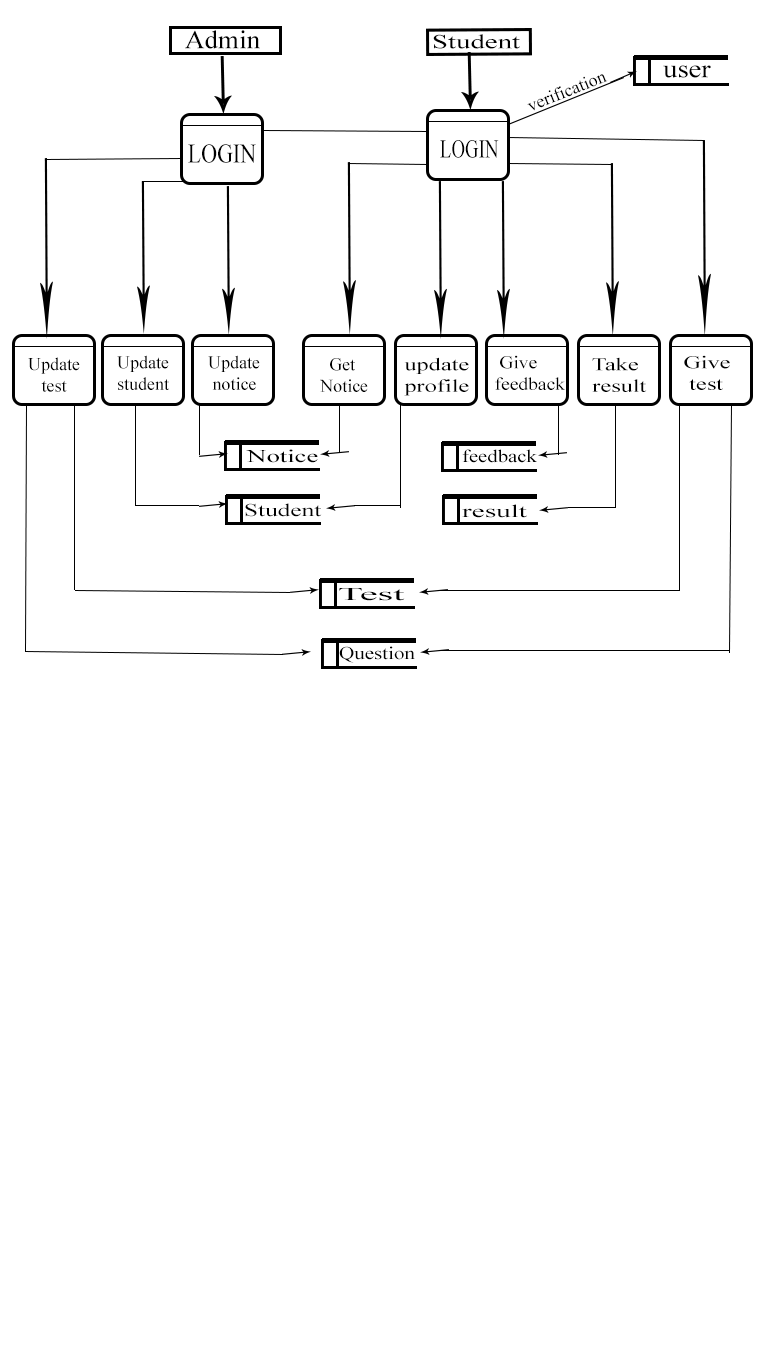
<style>
.page{position:relative;width:768px;height:1366px;background:#ffffff}
.page>*{position:absolute;margin:0}
.t1{font:26px "TimesNewRomanPSMT";color:#000000;scale:1.04 1}
.t2{font:20px "TimesNewRomanPSMT";color:#000000;scale:1.44 1}
.t3{font:25.5px "TimesNewRomanPSMT";color:#000000;scale:1.13 1}
.t4{font:18px "TimesNewRomanPSMT";color:#000000}
.t5{font:26.8px "TimesNewRomanPSMT";color:#000000;scale:0.82 1}
.t6{font:25.9px "TimesNewRomanPSMT";color:#000000;scale:0.73 1}
.t7{font:18px "TimesNewRomanPSMT";color:#000000;scale:1.35 1}
.t8{font:18px "TimesNewRomanPSMT";color:#000000;scale:1.08 1}
.t9{font:18px "TimesNewRomanPSMT";color:#000000;scale:1.48 1}
.t10{font:18px "TimesNewRomanPSMT";color:#000000;scale:1.15 1}
.t11{font:18px "TimesNewRomanPSMT";color:#000000;scale:1.41 1}
.t12{font:18px "TimesNewRomanPSMT";color:#000000;scale:1.62 1}
.t13{font:18px "TimesNewRomanPSMT";color:#000000;scale:2.23 1}
.t14{font:18px "TimesNewRomanPSMT";color:#000000;scale:1.17 1}
</style>
<div class="page">
<p class="t1" style="left:185px;top:30px;width:75px;height:19px">Admin</p>
<p class="t2" style="left:433px;top:34px;width:87px;height:15px">Student</p>
<p class="t3" style="left:663px;top:65px;width:48px;height:13px">user</p>
<p class="t4" style="left:527px;top:74px;width:81px;height:37px;rotate:-22deg">verification</p>
<p class="t5" style="left:188px;top:144px;width:68px;height:19px">LOGIN</p>
<p class="t6" style="left:440px;top:140px;width:59px;height:18px">LOGIN</p>
<p class="t4" style="left:28px;top:357px;width:52px;height:35px">Update <br>   test</p>
<p class="t4" style="left:117px;top:355px;width:52px;height:35px">Update <br> student</p>
<p class="t4" style="left:208px;top:355px;width:52px;height:35px">Update <br>  notice</p>
<p class="t4" style="left:320px;top:358px;width:48px;height:34px">Get <br>Notice</p>
<p class="t7" style="left:404px;top:357px;width:65px;height:39px">update<br>profile</p>
<p class="t8" style="left:495px;top:355px;width:70px;height:35px">Give <br>feedback</p>
<p class="t7" style="left:592px;top:357px;width:55px;height:35px">Take <br> result</p>
<p class="t7" style="left:684px;top:355px;width:46px;height:35px">Give <br>  test</p>
<p class="t9" style="left:246px;top:449px;width:72px;height:14px">Notice</p>
<p class="t10" style="left:462px;top:449px;width:75px;height:14px">feedback</p>
<p class="t11" style="left:245px;top:503px;width:77px;height:14px">Student</p>
<p class="t12" style="left:462px;top:504px;width:65px;height:14px">result</p>
<p class="t13" style="left:339px;top:588px;width:66px;height:13px">Test</p>
<p class="t14" style="left:339px;top:646px;width:76px;height:17px">Question</p>
</div>
